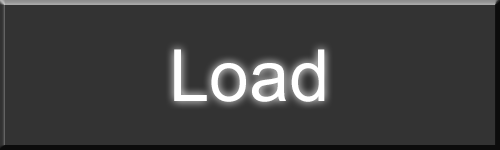
<style>
.page{position:relative;width:500px;height:150px;background:#333333}
.page>*{position:absolute;margin:0}
.t1{font:72px "ArialMT";color:#ffffff}
</style>
<div class="page">
<p class="t1" style="left:174px;top:49px;width:151px;height:53px">Load</p>
</div>
